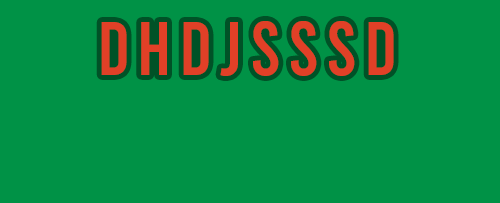
<style>
.page{position:relative;width:500px;height:203px;background:#009246}
.page>*{position:absolute;margin:0}
.t1{font:75px "Bebas-Regular";letter-spacing:0.1em;color:#e14027}
</style>
<div class="page">
<p class="t1" style="left:101px;top:21px;width:293px;height:55px">dhdjsssdsd</p>
</div>
